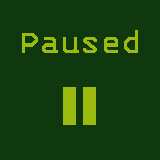
<style>
.page{position:relative;width:160px;height:160px;background:#0f380f}
.page>*{position:absolute;margin:0}
.t1{font:36px "3270-Regular";color:#9bbc0f;font-weight:bold}
</style>
<div class="page">
<p class="t1" style="left:22px;top:30px;width:116px;height:23px">Paused</p>
</div>
